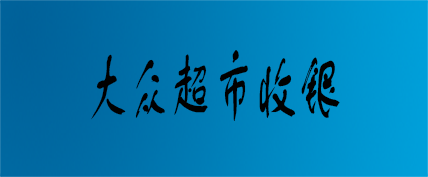
<style>
.page{position:relative;width:428px;height:177px}
.page>*{position:absolute;margin:0}
.t1{font:79.7px "FZSTK--GBK1-0";color:#000000;scale:0.54 1}
</style>
<div class="page">
<p class="t1" style="left:91px;top:50px;width:249px;height:71px">大众超市收银</p>
</div>
